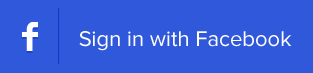
<style>
.page{position:relative;width:313px;height:73px;background:#3058da}
.page>*{position:absolute;margin:0}
.t1{font:22px "ProximaNova-Regular";color:#ffffff}
</style>
<div class="page">
<p class="t1" style="left:79px;top:31px;width:213px;height:20px">Sign in with Facebook</p>
</div>
